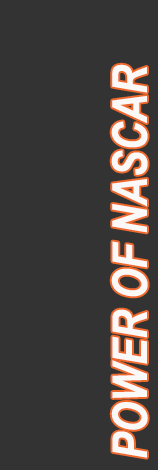
<style>
.page{position:relative;width:158px;height:470px;background:#333333}
.page>*{position:absolute;margin:0}
.t1{font:48px "ArialNarrow-BoldItalic";color:#fbf8f8}
</style>
<div class="page">
<p class="t1" style="left:111px;top:64px;width:37px;height:394px;rotate:-90deg">POWER OF NASCAR</p>
</div>
